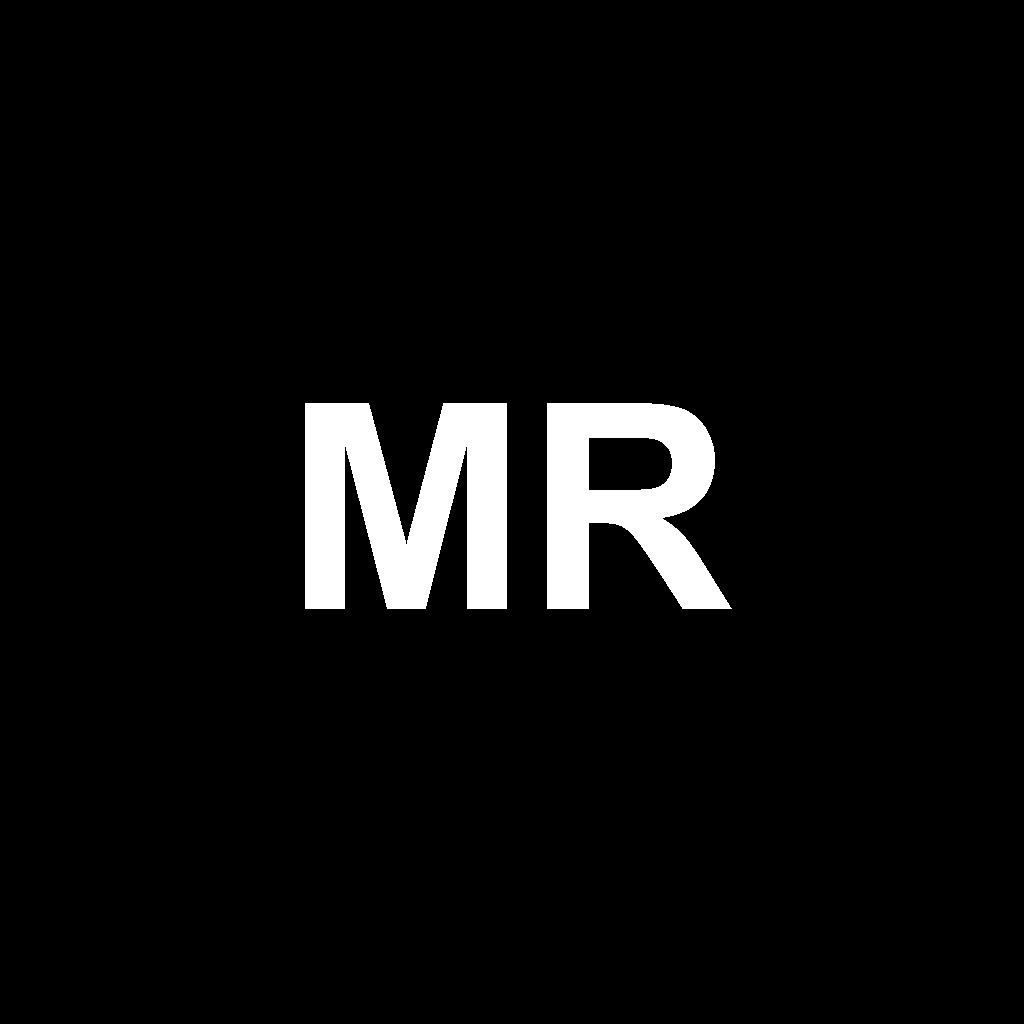
<style>
.page{position:relative;width:1024px;height:1024px;background:#000000}
.page>*{position:absolute;margin:0}
.t1{font:287.5px "Arial-BoldMT";color:#ffffff}
</style>
<div class="page">
<p class="t1" style="left:305px;top:403px;width:427px;height:206px">MR</p>
</div>
